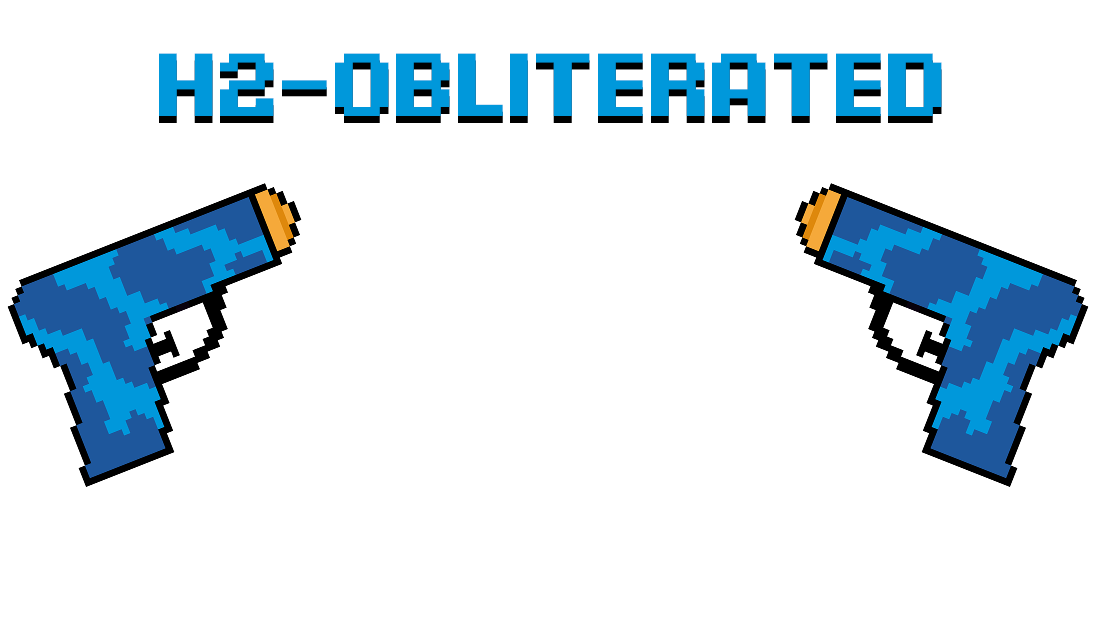
<style>
.page{position:relative;width:1100px;height:619px;background:#ffffff}
.page>*{position:absolute;margin:0}
.t1{font:91.5px "PixelDigivolve";letter-spacing:-0.01em;color:#0098db}
</style>
<div class="page">
<p class="t1" style="left:159px;top:53px;width:783px;height:63px">H2-Obliterated</p>
</div>
